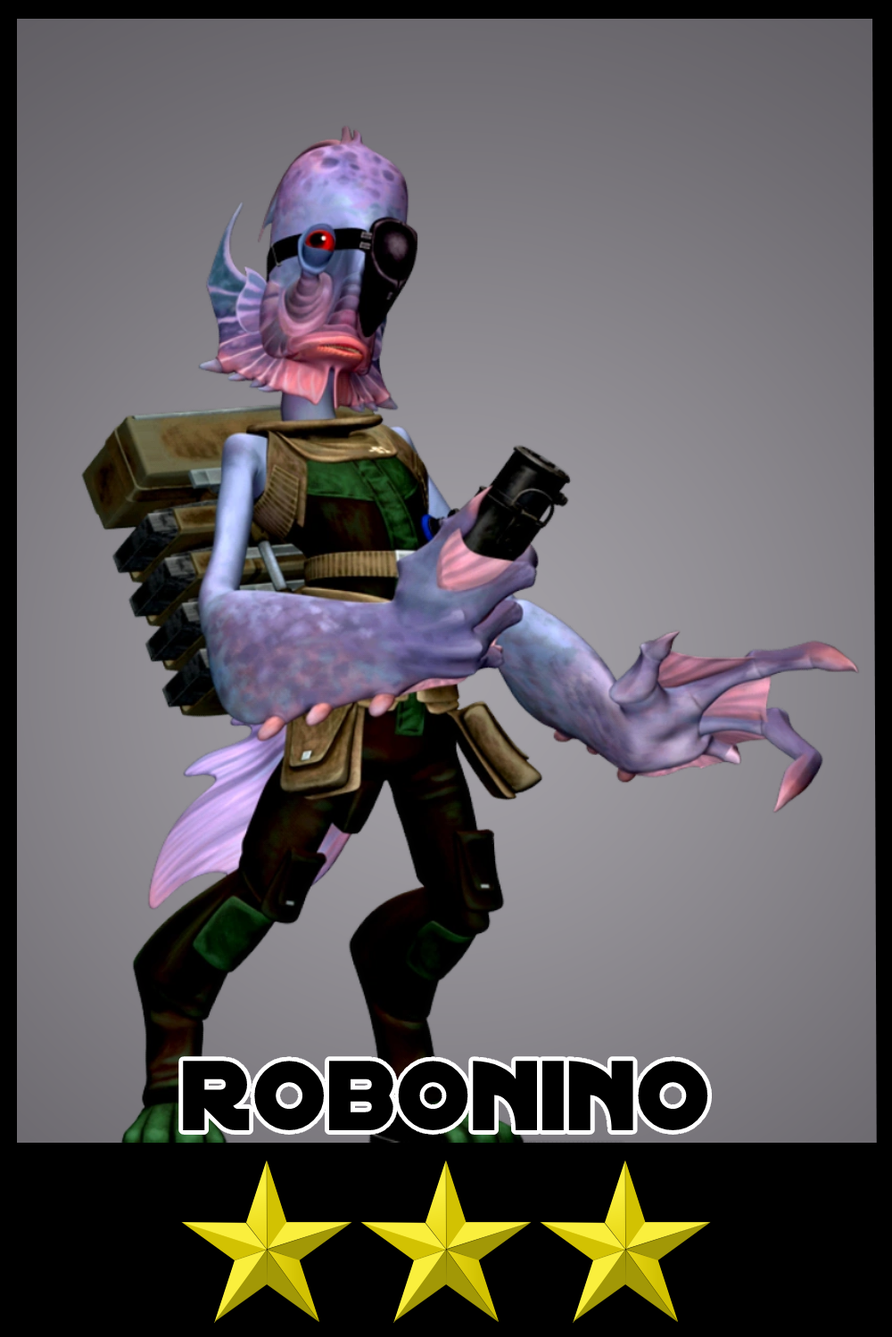
<style>
.page{position:relative;width:892px;height:1337px}
.page>*{position:absolute;margin:0}
.t1{font:106.5px "DistantGalaxy";color:#000000}
</style>
<div class="page">
<p class="t1" style="left:183px;top:1061px;width:525px;height:70px">robonino</p>
</div>
